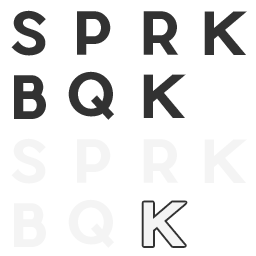
<style>
.page{position:relative;width:256px;height:256px;background:#ffffff}
.page>*{position:absolute;margin:0}
.t1{font:58px "PierSans-Bold";color:#323232}
.t2{font:58px "PierSans-Bold";color:#f4f4f4}
</style>
<div class="page">
<p class="t1" style="left:11px;top:10px;width:35px;height:46px">S</p>
<p class="t1" style="left:77px;top:11px;width:34px;height:44px">P</p>
<p class="t1" style="left:143px;top:11px;width:36px;height:44px">R</p>
<p class="t1" style="left:204px;top:11px;width:43px;height:44px">K</p>
<p class="t1" style="left:14px;top:75px;width:32px;height:44px">B</p>
<p class="t1" style="left:68px;top:71px;width:46px;height:49px">Q</p>
<p class="t1" style="left:143px;top:74px;width:43px;height:44px">K</p>
<p class="t2" style="left:11px;top:138px;width:35px;height:46px">S</p>
<p class="t2" style="left:77px;top:139px;width:34px;height:44px">P</p>
<p class="t2" style="left:143px;top:139px;width:36px;height:44px">R</p>
<p class="t2" style="left:204px;top:139px;width:43px;height:44px">K</p>
<p class="t2" style="left:14px;top:203px;width:32px;height:44px">B</p>
<p class="t2" style="left:68px;top:199px;width:46px;height:49px">Q</p>
<p class="t2" style="left:143px;top:202px;width:43px;height:44px">K</p>
</div>
